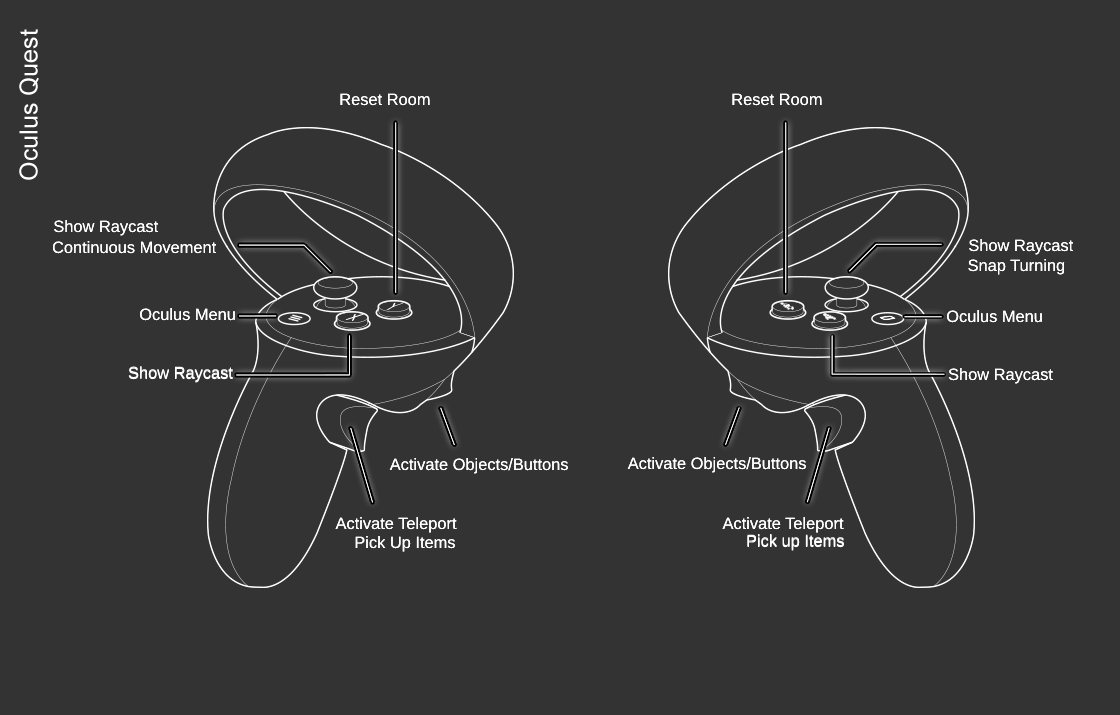
<style>
.page{position:relative;width:1120px;height:715px;background:#333333}
.page>*{position:absolute;margin:0}
.t1{font:25px "ArialMT";color:#ffffff}
.t2{font:16.4px "ArialMT";color:#ffffff}
</style>
<div class="page">
<p class="t1" style="left:19px;top:29px;width:20px;height:151px;rotate:-90deg">Oculus Quest</p>
<p class="t2" style="left:340px;top:93px;width:90px;height:13px">Reset Room</p>
<p class="t2" style="left:340px;top:93px;width:90px;height:13px">Reset Room</p>
<p class="t2" style="left:732px;top:93px;width:90px;height:13px">Reset Room</p>
<p class="t2" style="left:732px;top:93px;width:90px;height:13px">Reset Room</p>
<p class="t2" style="left:54px;top:220px;width:105px;height:16px">Show Raycast</p>
<p class="t2" style="left:54px;top:220px;width:105px;height:16px">Show Raycast</p>
<p class="t2" style="left:52px;top:241px;width:165px;height:13px">Continuous Movement</p>
<p class="t2" style="left:52px;top:241px;width:165px;height:13px">Continuous Movement</p>
<p class="t2" style="left:969px;top:239px;width:105px;height:16px">Show Raycast</p>
<p class="t2" style="left:969px;top:239px;width:105px;height:16px">Show Raycast</p>
<p class="t2" style="left:968px;top:259px;width:97px;height:16px">Snap Turning</p>
<p class="t2" style="left:968px;top:259px;width:97px;height:16px">Snap Turning</p>
<p class="t2" style="left:140px;top:308px;width:95px;height:13px">Oculus Menu</p>
<p class="t2" style="left:140px;top:308px;width:95px;height:13px">Oculus Menu</p>
<p class="t2" style="left:947px;top:310px;width:95px;height:13px">Oculus Menu</p>
<p class="t2" style="left:947px;top:310px;width:95px;height:13px">Oculus Menu</p>
<p class="t2" style="left:128px;top:366px;width:105px;height:16px">Show Raycast</p>
<p class="t2" style="left:128px;top:367px;width:105px;height:16px">Show Raycast</p>
<p class="t2" style="left:948px;top:368px;width:105px;height:16px">Show Raycast</p>
<p class="t2" style="left:948px;top:368px;width:105px;height:16px">Show Raycast</p>
<p class="t2" style="left:389px;top:458px;width:179px;height:16px">Activate Objects/Buttons</p>
<p class="t2" style="left:389px;top:458px;width:179px;height:16px">Activate Objects/Buttons</p>
<p class="t2" style="left:627px;top:457px;width:179px;height:16px">Activate Objects/Buttons</p>
<p class="t2" style="left:627px;top:457px;width:179px;height:16px">Activate Objects/Buttons</p>
<p class="t2" style="left:335px;top:517px;width:122px;height:16px">Activate Teleport</p>
<p class="t2" style="left:335px;top:517px;width:122px;height:16px">Activate Teleport</p>
<p class="t2" style="left:722px;top:517px;width:122px;height:16px">Activate Teleport</p>
<p class="t2" style="left:722px;top:517px;width:122px;height:16px">Activate Teleport</p>
<p class="t2" style="left:747px;top:534px;width:97px;height:16px">Pick up Items</p>
<p class="t2" style="left:355px;top:536px;width:100px;height:16px">Pick Up Items</p>
<p class="t2" style="left:355px;top:536px;width:100px;height:16px">Pick Up Items</p>
<p class="t2" style="left:747px;top:535px;width:97px;height:16px">Pick up Items</p>
</div>
